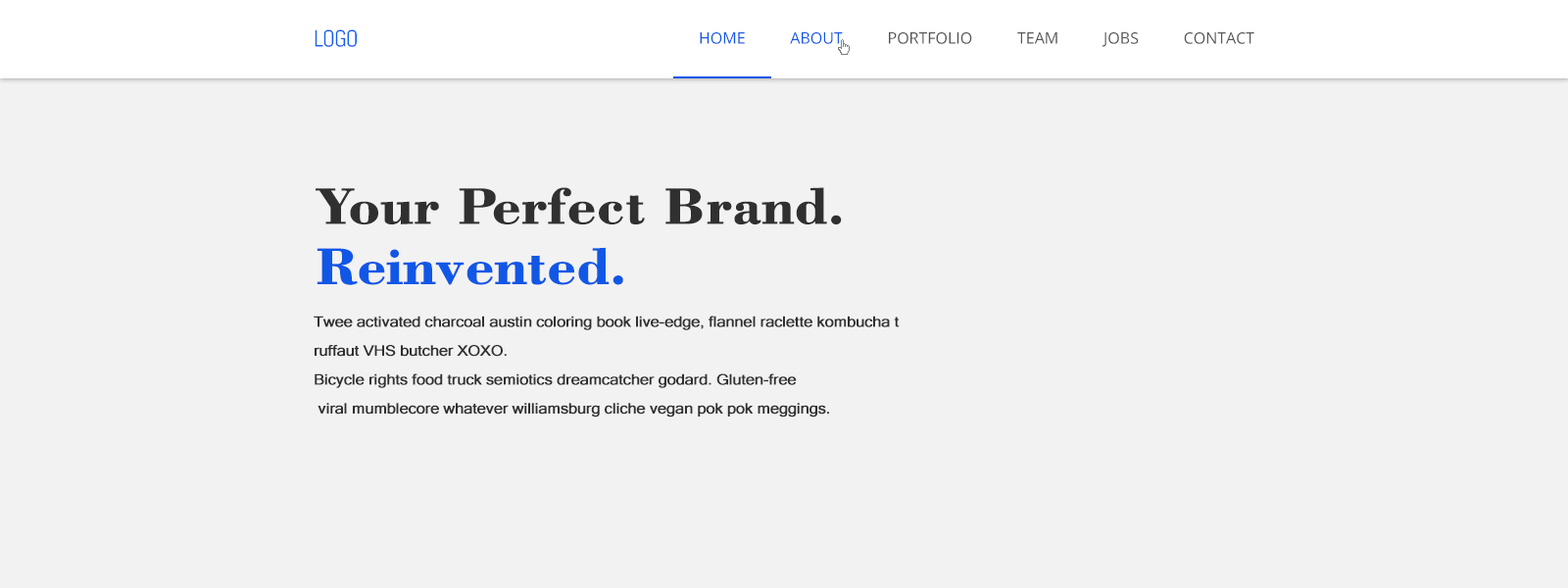
<style>
.page{position:relative;width:1568px;height:588px;background:#f2f2f2}
.page>*{position:absolute;margin:0}
.t1{font:23.5px "Abel-Regular";letter-spacing:-0.04em;color:#165ef0}
.t2{font:15.7px "OpenSans";color:#555555;text-transform:uppercase}
.t3{font:15.7px "OpenSans";color:#1157e6;text-transform:uppercase}
.t4{font:54.1px "BodoniBT-Bold";letter-spacing:-0.02em;color:#303030;font-weight:bold;scale:1.09 1}
.t5{font:54.1px "BodoniBT-Bold";letter-spacing:-0.02em;color:#1157e6;font-weight:bold;scale:1.09 1}
.t6{font:14.4px/57.8px "MicrosoftSansSerif";letter-spacing:-0.02em;color:#303030;font-weight:bold;scale:1.09 1}
</style>
<div class="page">
<p class="t1" style="left:315px;top:29px;width:42px;height:18px">LOGO</p>
<p class="t2" style="left:700px;top:32px;width:554px;height:15px"><span class="t3">Home           About</span>           Portfolio           Team           Jobs           Contact</p>
<p class="t4" style="left:316px;top:187px;width:526px;height:37px">Your Perfect Brand.</p>
<p class="t5" style="left:317px;top:247px;width:306px;height:38px">Reinvented.</p>
<p class="t6" style="left:314px;top:316px;width:586px;height:101px">Twee activated charcoal austin coloring book live-edge, flannel raclette kombucha t<br>ruffaut VHS butcher XOXO. <br>Bicycle rights food truck semiotics dreamcatcher godard. Gluten-free<br> viral mumblecore whatever williamsburg cliche vegan pok pok meggings.</p>
</div>
